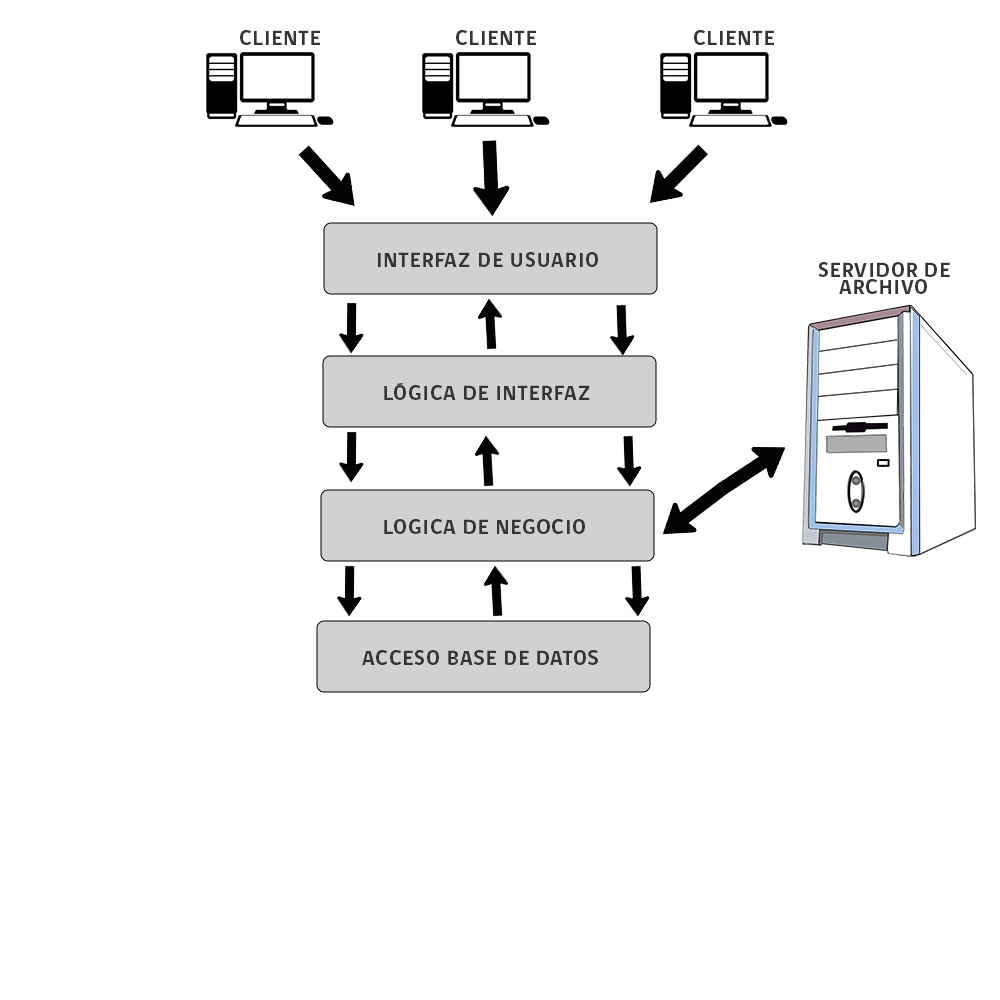
<style>
.page{position:relative;width:1000px;height:1000px;background:#ffffff}
.page>*{position:absolute;margin:0}
.t1{font:21px "gobCL-Bold";letter-spacing:0.05em;color:#353535}
</style>
<div class="page">
<p class="t1" style="left:240px;top:30px;width:80px;height:15px">CLIENTE</p>
<p class="t1" style="left:456px;top:30px;width:80px;height:15px">CLIENTE</p>
<p class="t1" style="left:694px;top:30px;width:80px;height:15px">CLIENTE</p>
<p class="t1" style="left:378px;top:252px;width:220px;height:15px">INTERFAZ DE USUARIO</p>
<p class="t1" style="left:818px;top:262px;width:132px;height:32px">SERVIDOR DE ARCHIVO</p>
<p class="t1" style="left:384px;top:383px;width:206px;height:17px">LÓGICA DE INTERFAZ</p>
<p class="t1" style="left:384px;top:519px;width:201px;height:15px">LOGICA DE NEGOCIO</p>
<p class="t1" style="left:362px;top:650px;width:236px;height:15px">ACCESO BASE DE DATOS</p>
</div>
